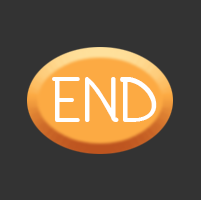
<style>
.page{position:relative;width:201px;height:200px;background:#333333}
.page>*{position:absolute;margin:0}
.t1{font:58.3px "Torid";color:#ffffff}
</style>
<div class="page">
<p class="t1" style="left:52px;top:77px;width:105px;height:45px">END</p>
</div>
